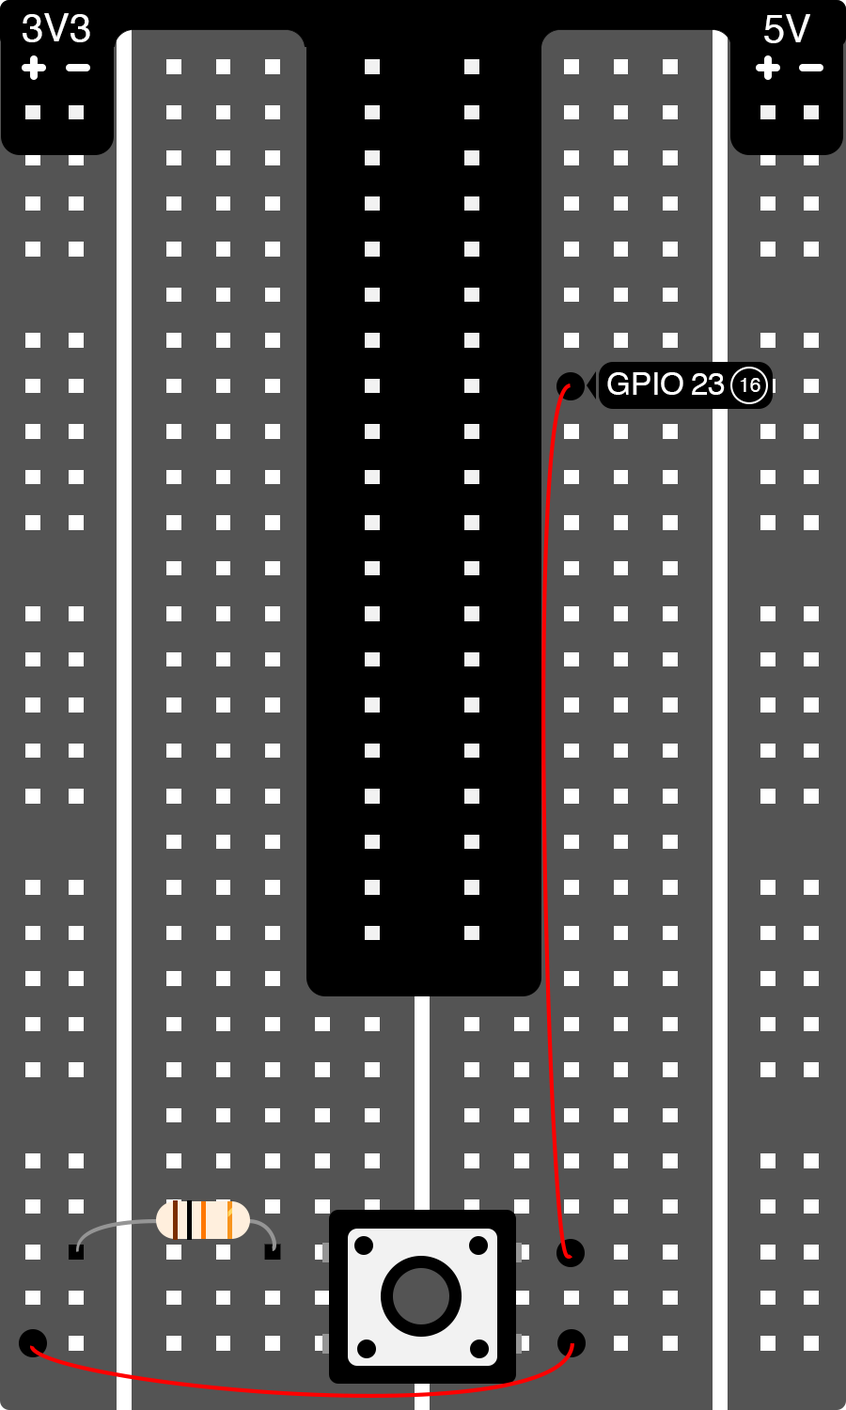
<style>
.page{position:relative;width:846px;height:1410px;background:#545454}
.page>*{position:absolute;margin:0}
.t1{font:39.2px "Helvetica";color:#ffffff}
.t2{font:31.3px "Helvetica";color:#ffffff}
.t3{font:19.6px "Helvetica";color:#ffffff}
</style>
<div class="page">
<p class="t1" style="left:23px;top:13px;width:67px;height:29px">3V3</p>
<p class="t1" style="left:764px;top:14px;width:46px;height:29px">5V</p>
<p class="t2" style="left:607px;top:372px;width:118px;height:23px">GPIO 23</p>
<p class="t3" style="left:740px;top:378px;width:20px;height:14px">16</p>
</div>
